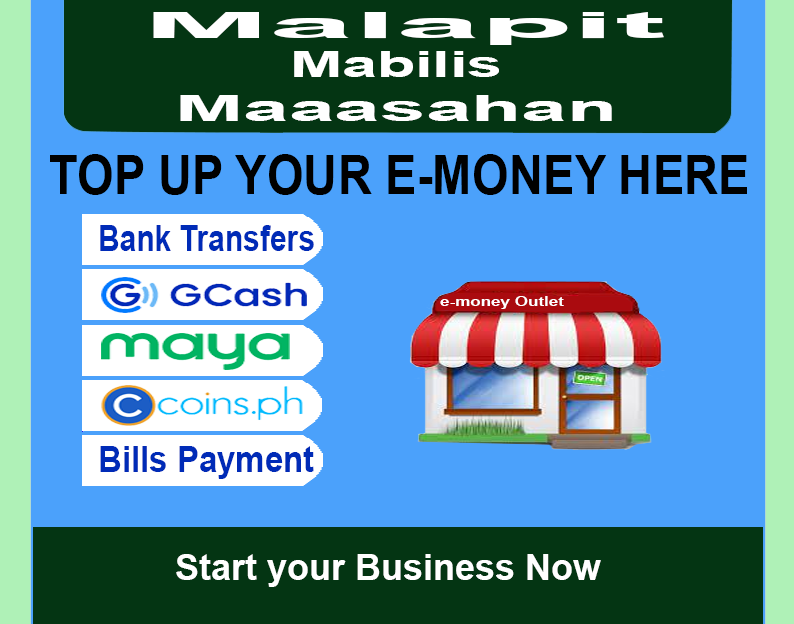
<style>
.page{position:relative;width:794px;height:624px;background:#4ba1fb}
.page>*{position:absolute;margin:0}
.t1{font:35.6px "Arial-BoldMT";color:#ffffff;scale:4.25 1}
.t2{font:35.6px "Arial-BoldMT";color:#ffffff;scale:1.75 1}
.t3{font:35.6px "Arial-BoldMT";color:#ffffff;scale:2.3 1}
.t4{font:54.3px "Arial-BoldMT";color:#000000;scale:0.87 1}
.t5{font:35.6px "Arial-BoldMT";color:#002bb7;scale:0.84 1}
.t6{font:13px "Arial-BoldMT";color:#ffffff;scale:1.31 1}
.t7{font:35.6px "Arial-BoldMT";color:#002bb7;scale:0.92 1}
.t8{font:36px "Arial-BoldMT";color:#ffffff}
</style>
<div class="page">
<p class="t1" style="left:153px;top:12px;width:511px;height:33px">Malapit</p>
<p class="t2" style="left:294px;top:51px;width:205px;height:26px">Mabilis</p>
<p class="t3" style="left:180px;top:95px;width:432px;height:26px">Maaasahan</p>
<p class="t4" style="left:50px;top:154px;width:697px;height:41px">TOP UP YOUR E-MONEY HERE</p>
<p class="t5" style="left:100px;top:225px;width:214px;height:26px">Bank Transfers</p>
<p class="t6" style="left:440px;top:296px;width:124px;height:13px">e-money Outlet</p>
<p class="t7" style="left:100px;top:446px;width:214px;height:33px">Bills Payment</p>
<p class="t8" style="left:176px;top:554px;width:425px;height:33px">Start your Business Now</p>
</div>
